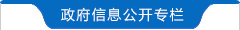
<style>
.page{position:relative;width:240px;height:30px;background:#056bc0}
.page>*{position:absolute;margin:0}
.t1{font:14px "MicrosoftYaHei";letter-spacing:0.11em;color:#ffffff}
</style>
<div class="page">
<p class="t1" style="left:61px;top:7px;width:123px;height:15px">政府信息公开专栏</p>
</div>
